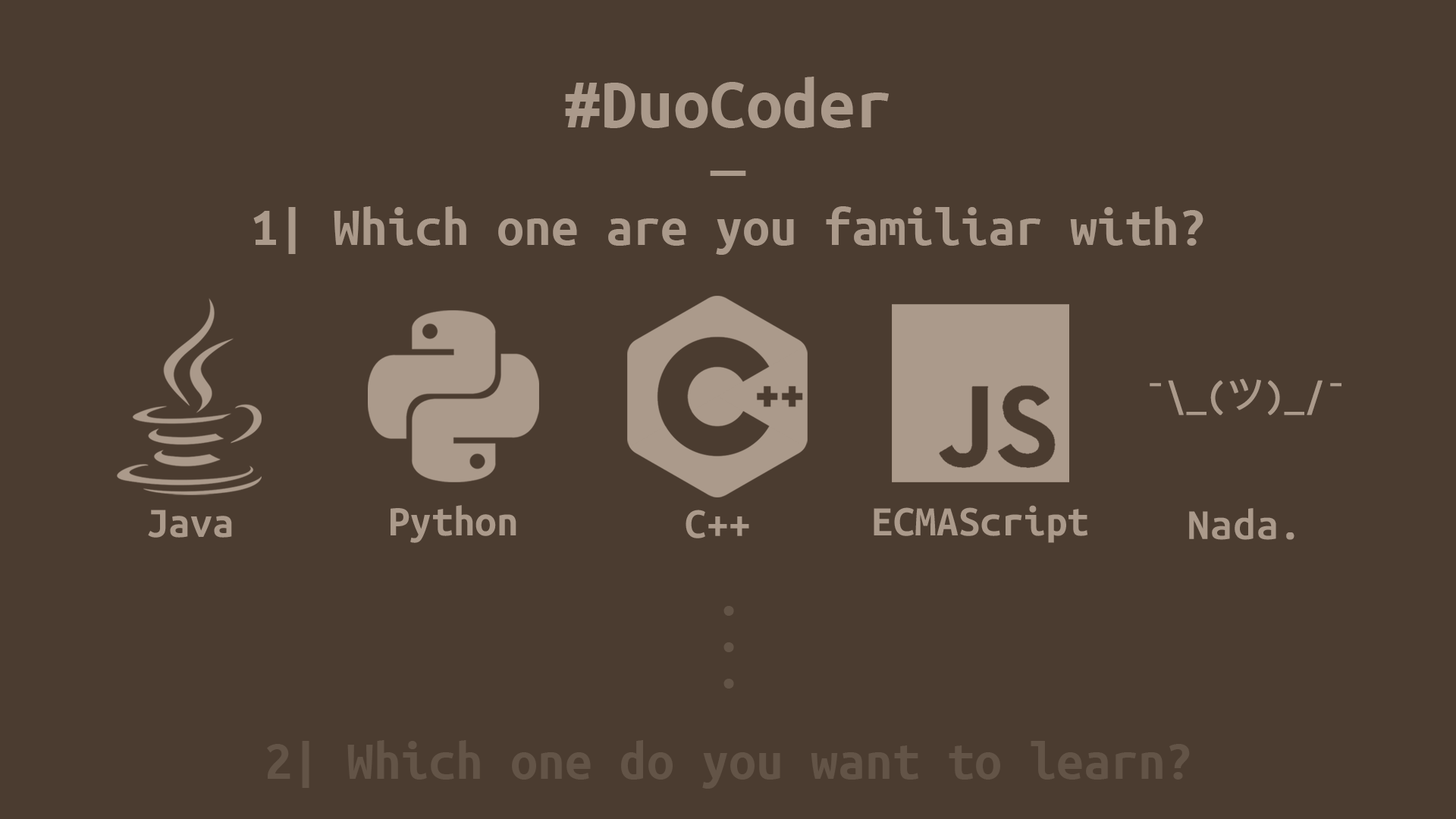
<style>
.page{position:relative;width:1456px;height:819px;background:#4b3c30}
.page>*{position:absolute;margin:0}
.t1{font:72.8px/36.4px "UbuntuMono-Bold";color:#ab9a8b}
.t2{font:72.8px/36.4px "UbuntuMono-Regular";color:#ab9a8b}
.t3{font:54.6px "UbuntuMono-Bold";color:#ab9a8b}
.t4{font:39.2px "UbuntuMono-Regular";color:#ab9a8b;font-weight:bold}
.t5{font:39.2px "HiraKakuProN-W3";color:#ab9a8b;font-weight:bold}
.t6{font:43.6px "UbuntuMono-Bold";color:#ab9a8b}
.t7{font:43.6px "UbuntuMono-Regular";color:#ab9a8b;font-weight:bold}
.t8{font:54.6px/54.6px "UbuntuMono-Bold";color:#635447}
.t9{font:54.6px/36.4px "UbuntuMono-Bold";color:#635447}
</style>
<div class="page">
<p class="t1" style="left:565px;top:77px;width:324px;height:99px;text-align:center">#DuoCoder<br><span class="t2">_</span></p>
<p class="t3" style="left:253px;top:206px;width:950px;height:49px">1| Which one are you familiar with?</p>
<p class="t4" style="left:1150px;top:378px;width:191px;height:38px">¯\_(<span class="t5">ツ</span>)_/¯</p>
<p class="t6" style="left:148px;top:510px;width:84px;height:28px">Java</p>
<p class="t6" style="left:391px;top:505px;width:125px;height:38px">Python</p>
<p class="t6" style="left:686px;top:510px;width:63px;height:28px">C++</p>
<p class="t6" style="left:874px;top:505px;width:214px;height:38px">ECMAScript</p>
<p class="t7" style="left:1189px;top:508px;width:105px;height:32px">Nada.</p>
<p class="t8" style="left:267px;top:606px;width:923px;height:183px;text-align:center"><span class="t9"><br>.<br>.<br>.<br><br></span>2| Which one do you want to learn?</p>
</div>
